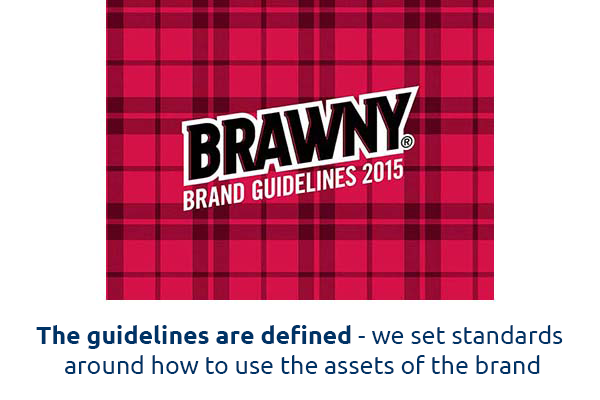
<style>
.page{position:relative;width:600px;height:400px;background:#ffffff}
.page>*{position:absolute;margin:0}
.t1{font:25px "Ubuntu";color:#003366}
.t2{font:25px "Ubuntu-Bold";color:#003366}
</style>
<div class="page">
<p class="t1" style="left:36px;top:325px;width:527px;height:49px;text-align:center"><span class="t2">The guidelines are defined</span> - we set standards <br>around how to use the assets of the brand</p>
</div>
